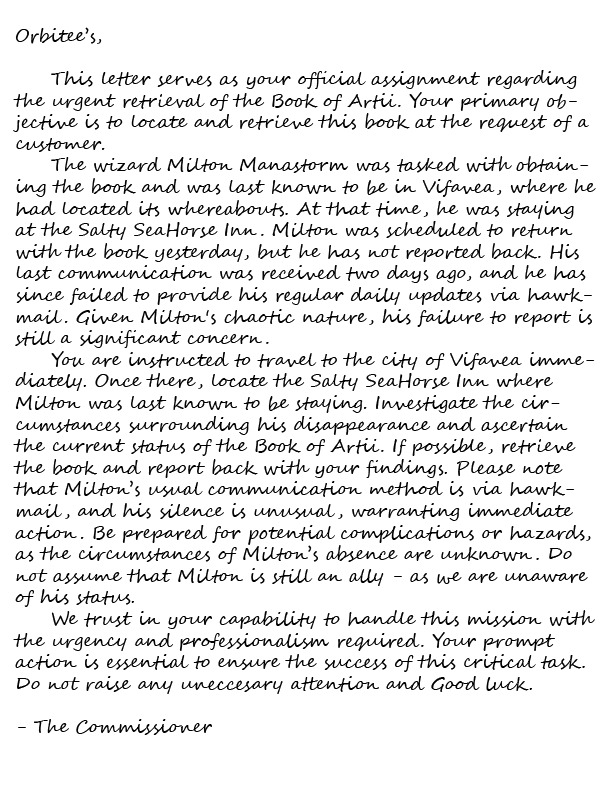
<style>
.page{position:relative;width:612px;height:792px;background:#ffffff}
.page>*{position:absolute;margin:0}
.t1{font:18px "SegoeScript";color:#000000}
</style>
<div class="page">
<p class="t1" style="left:13px;top:27px;width:583px;height:708px">Orbitee’s,<br><br> This letter serves as your official assignment regarding the urgent retrieval of the Book of Artii. Your primary objective is to locate and retrieve this book at the request of a customer.<br> The wizard Milton Manastorm was tasked with obtaining the book and was last known to be in Vifavea, where he had located its whereabouts. At that time, he was staying at the Salty SeaHorse Inn. Milton was scheduled to return with the book yesterday, but he has not reported back. His last communication was received two days ago, and he has since failed to provide his regular daily updates via hawkmail. Given Milton's chaotic nature, his failure to report is still a significant concern.<br> You are instructed to travel to the city of Vifavea immediately. Once there, locate the Salty SeaHorse Inn where Milton was last known to be staying. Investigate the circumstances surrounding his disappearance and ascertain the current status of the Book of Artii. If possible, retrieve the book and report back with your findings. Please note that Milton’s usual communication method is via hawkmail, and his silence is unusual, warranting immediate action. Be prepared for potential complications or hazards, as the circumstances of Milton’s absence are unknown. Do not assume that Milton is still an ally - as we are unaware of his status.<br> We trust in your capability to handle this mission with the urgency and professionalism required. Your prompt action is essential to ensure the success of this critical task. Do not raise any uneccesary attention and Good luck.<br><br>- The Commissioner</p>
</div>
